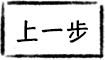
<style>
.page{position:relative;width:105px;height:60px;background:#ffffff}
.page>*{position:absolute;margin:0}
.t1{font:23.8px "HannotateSC-W7";letter-spacing:0.055em;color:#000000}
</style>
<div class="page">
<p class="t1" style="left:16px;top:20px;width:73px;height:23px">上一步</p>
</div>
